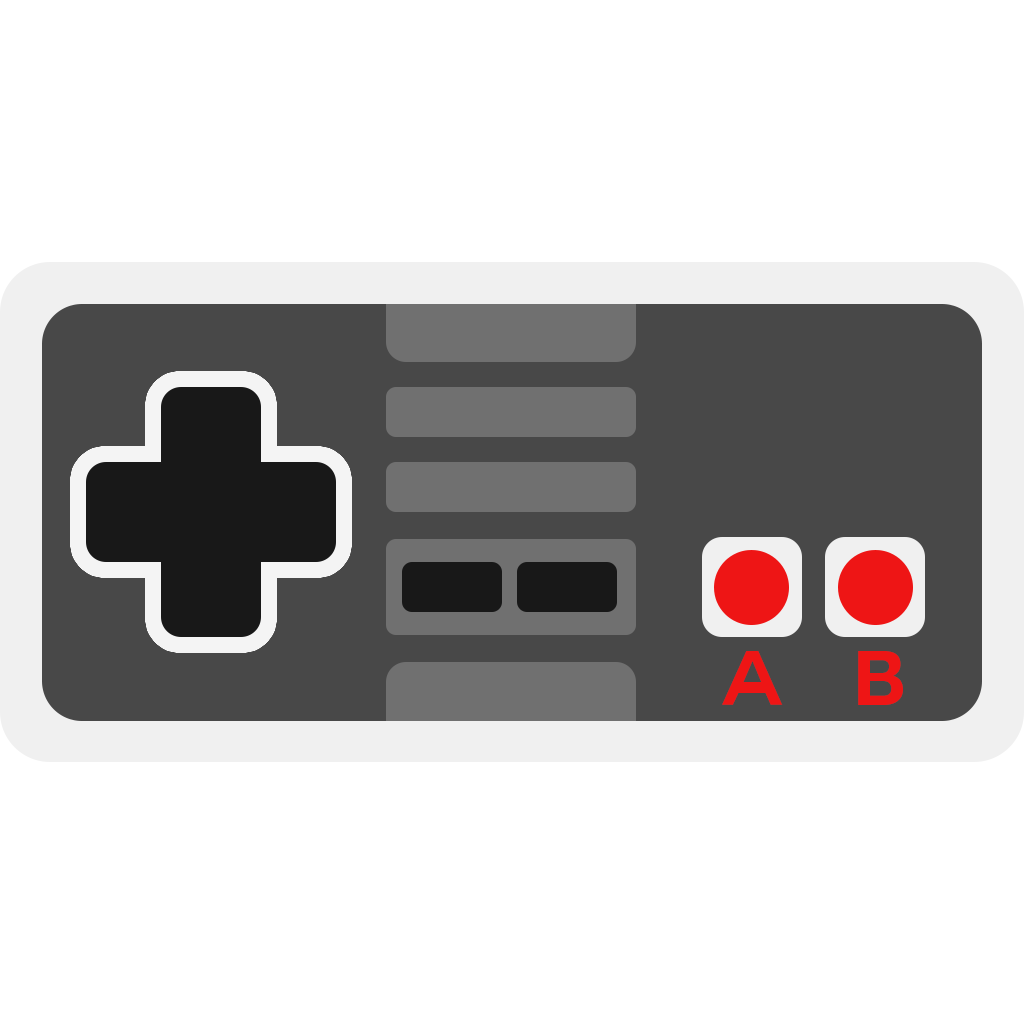
<style>
.page{position:relative;width:1024px;height:1024px;background:#ffffff}
.page>*{position:absolute;margin:0}
.t1{font:75px "Couture-Bold";color:#ee1515}
</style>
<div class="page">
<p class="t1" style="left:722px;top:651px;width:61px;height:54px">A</p>
<p class="t1" style="left:858px;top:651px;width:45px;height:54px">B</p>
</div>
